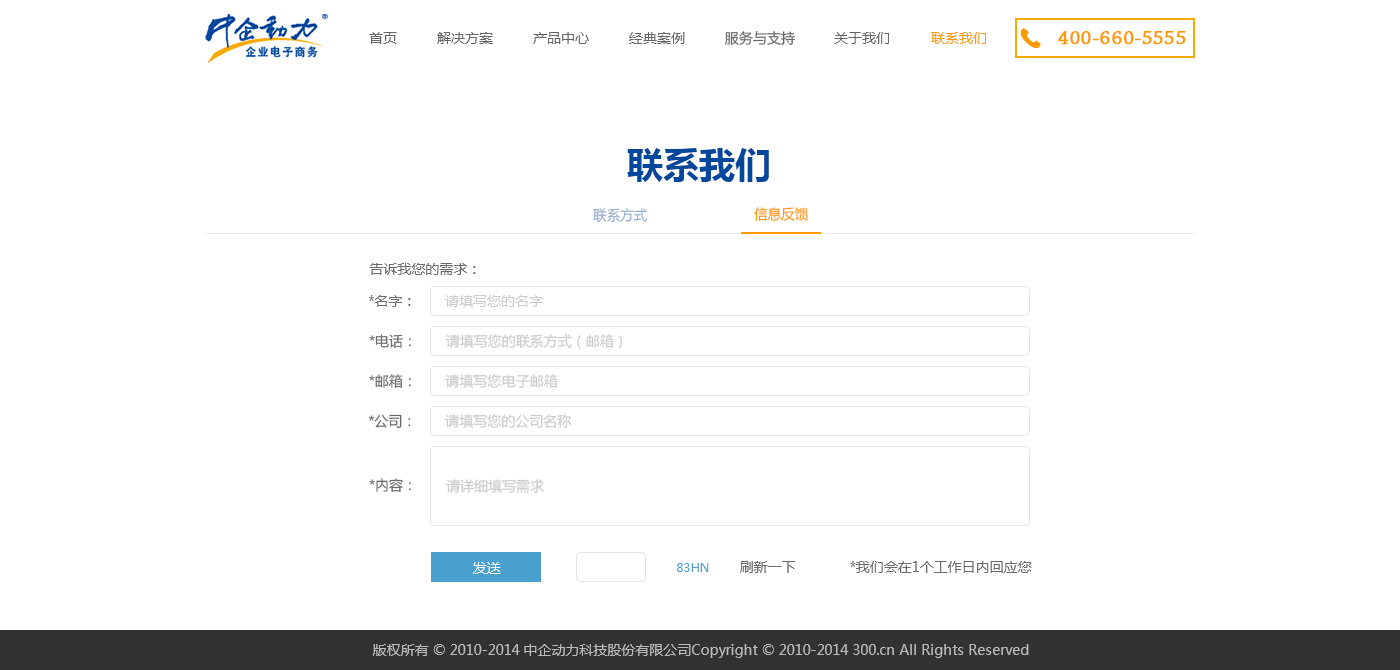
<style>
.page{position:relative;width:1400px;height:670px;background:#ffffff}
.page>*{position:absolute;margin:0}
.t1{font:14px "MicrosoftYaHei";color:#666666}
.t2{font:14px "MicrosoftYaHei";color:#ff9900}
.t3{font:20px "ChaparralPro-Regular";color:#ff9900;font-weight:bold}
.t4{font:36px "MicrosoftYaHei-Bold";color:#01479c}
.t5{font:14px "MicrosoftYaHei";color:#95aece;scale:0.97 1}
.t6{font:14px "MicrosoftYaHei";color:#ff9900;scale:0.97 1}
.t7{font:14px "MicrosoftYaHei";color:#6b6b6b}
.t8{font:14px "MicrosoftYaHei";color:#cccccc}
.t9{font:14px "MicrosoftYaHei";color:#ffffff}
.t10{font:12px "MicrosoftYaHei";color:#4aa0cd}
.t11{font:14px "MicrosoftYaHei";color:#bcbcbc}
</style>
<div class="page">
<p class="t1" style="left:369px;top:32px;width:28px;height:12px">首页</p>
<p class="t1" style="left:437px;top:32px;width:56px;height:12px">解决方案</p>
<p class="t1" style="left:533px;top:32px;width:56px;height:12px">产品中心</p>
<p class="t1" style="left:629px;top:32px;width:56px;height:12px">经典案例</p>
<p class="t1" style="left:725px;top:31px;width:70px;height:14px">服务与支持</p>
<p class="t1" style="left:834px;top:32px;width:55px;height:12px">关于我们</p>
<p class="t2" style="left:931px;top:32px;width:55px;height:12px">联系我们</p>
<p class="t3" style="left:1058px;top:31px;width:128px;height:14px">400-660-5555</p>
<p class="t4" style="left:627px;top:148px;width:142px;height:34px">联系我们</p>
<p class="t5" style="left:593px;top:208px;width:55px;height:15px">联系方式</p>
<p class="t6" style="left:754px;top:207px;width:55px;height:14px">信息反馈</p>
<p class="t7" style="left:369px;top:263px;width:107px;height:12px">告诉我您的需求：</p>
<p class="t7" style="left:369px;top:295px;width:42px;height:12px">*名字：</p>
<p class="t8" style="left:445px;top:295px;width:98px;height:12px">请填写您的名字</p>
<p class="t7" style="left:369px;top:334px;width:43px;height:14px">*电话：</p>
<p class="t8" style="left:445px;top:334px;width:178px;height:15px">请填写您的联系方式（邮箱）</p>
<p class="t7" style="left:369px;top:374px;width:42px;height:14px">*邮箱：</p>
<p class="t8" style="left:445px;top:374px;width:113px;height:14px">请填写您电子邮箱</p>
<p class="t7" style="left:368px;top:414px;width:43px;height:14px">*公司：</p>
<p class="t8" style="left:445px;top:414px;width:127px;height:15px">请填写您的公司名称</p>
<p class="t7" style="left:369px;top:478px;width:43px;height:15px">*内容：</p>
<p class="t8" style="left:446px;top:479px;width:98px;height:14px">请详细填写需求</p>
<p class="t9" style="left:473px;top:562px;width:28px;height:12px">发送</p>
<p class="t10" style="left:677px;top:563px;width:32px;height:9px">83HN</p>
<p class="t7" style="left:740px;top:561px;width:56px;height:12px">刷新一下</p>
<p class="t7" style="left:850px;top:561px;width:182px;height:12px">*我们会在1个工作日内回应您</p>
<p class="t11" style="left:373px;top:644px;width:656px;height:14px">版权所有 © 2010-2014 中企动力科技股份有限公司Copyright © 2010-2014 300.cn All Rights Reserved</p>
</div>
